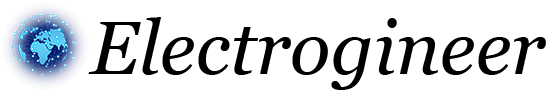
<style>
.page{position:relative;width:550px;height:90px;background:#ffffff}
.page>*{position:absolute;margin:0}
.t1{font:75px "Georgia-Italic";color:#000000}
</style>
<div class="page">
<p class="t1" style="left:88px;top:17px;width:458px;height:73px">Electrogineer</p>
</div>
